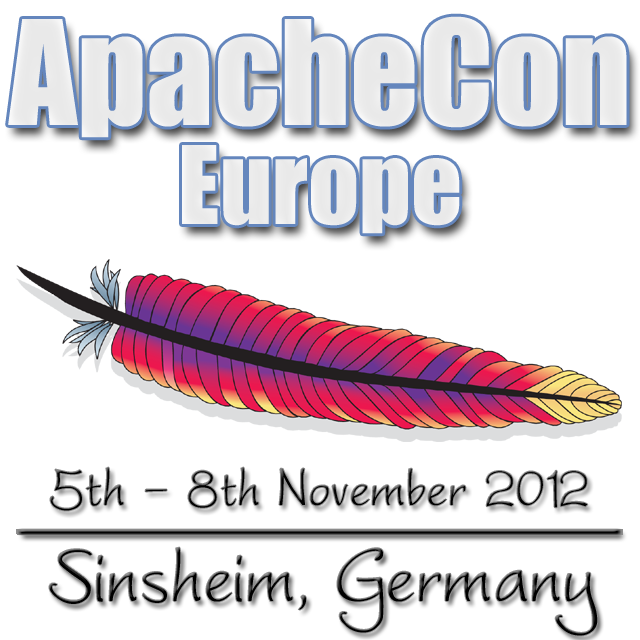
<style>
.page{position:relative;width:640px;height:640px;background:#ffffff}
.page>*{position:absolute;margin:0}
.t1{font:134px "Impact";color:#ffffff}
.t2{font:100px "Impact";color:#ffffff}
.t3{font:70px "WorstveldSling";color:#000000}
.t4{font:100px "WorstveldSling";color:#000000}
</style>
<div class="page">
<p class="t1" style="left:8px;top:16px;width:619px;height:122px">ApacheCon</p>
<p class="t2" style="left:182px;top:145px;width:278px;height:89px">Europe</p>
<p class="t3" style="left:50px;top:467px;width:538px;height:44px">5th - 8th November 2012</p>
<p class="t4" style="left:49px;top:547px;width:549px;height:89px">Sinsheim, Germany</p>
</div>
